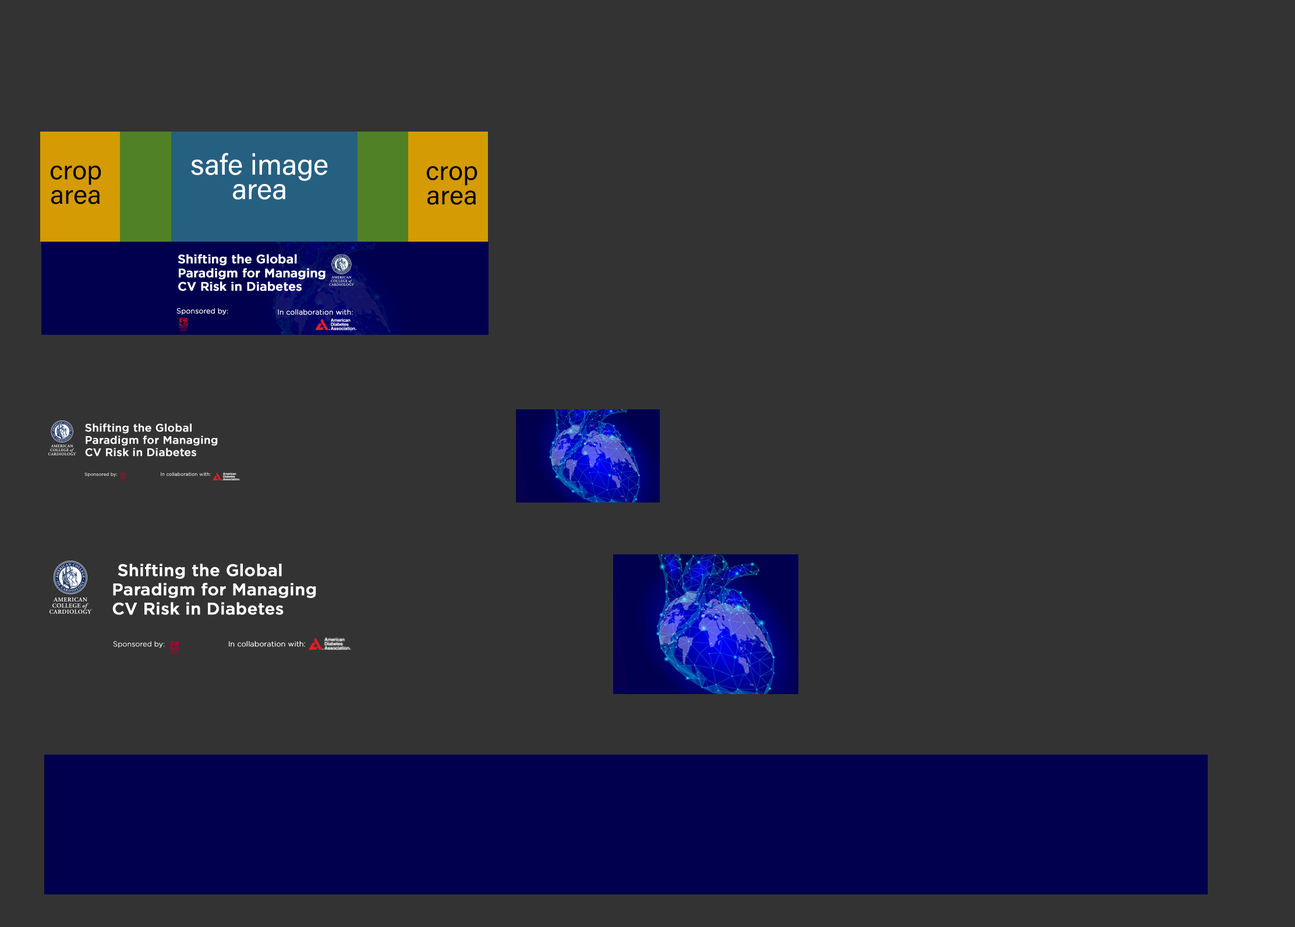
<style>
.page{position:relative;width:1295px;height:927px;background:#333333}
.page>*{position:absolute;margin:0}
.t1{font:29.1px/24.3px "AcuminConcept-Regular";color:#ffffff}
.t2{font:26.7px/24.3px "AcuminConcept-Regular";color:#000000}
.t3{font:12.1px/13.8px "Gotham-Medium";color:#ffffff;font-weight:bold}
.t4{font:7px "Gotham-Light";color:#ffffff;font-weight:bold}
.t5{font:10.9px/12.4px "Gotham-Medium";color:#ffffff;font-weight:bold}
.t6{font:4.4px "Gotham-Light";font-weight:bold}
.t7{font:4.7px "Gotham-Light";color:#ffffff;font-weight:bold}
.t8{font:16.7px/19.1px "Gotham-Medium";color:#ffffff;font-weight:bold}
.t9{font:16.7px/19.1px "Gotham-Light";color:#00aeef;font-weight:bold}
.t10{font:7.1px "Gotham-Light";color:#ffffff;font-weight:bold}
</style>
<div class="page">
<p class="t1" style="left:191px;top:153px;width:137px;height:47px;text-align:center">safe image<br>area</p>
<p class="t2" style="left:50px;top:165px;width:51px;height:39px;text-align:center">crop<br>area</p>
<p class="t2" style="left:426px;top:166px;width:52px;height:39px;text-align:center">crop<br>area</p>
<p class="t3" style="left:178px;top:254px;width:148px;height:37px">Shifting the Global <br>Paradigm for Managing <br>CV Risk in Diabetes</p>
<p class="t4" style="left:176px;top:308px;width:52px;height:7px">Sponsored by:</p>
<p class="t4" style="left:278px;top:309px;width:75px;height:6px">In collaboration with:</p>
<p class="t5" style="left:85px;top:423px;width:133px;height:34px">Shifting the Global <br>Paradigm for Managing <br>CV Risk in Diabetes</p>
<p class="t6" style="left:84px;top:472px;width:33px;height:5px">Sponsored by:</p>
<p class="t7" style="left:161px;top:472px;width:50px;height:4px">In collaboration with:</p>
<p class="t8" style="left:112px;top:564px;width:204px;height:51px"><span class="t9"> </span>Shifting the Global <br>Paradigm for Managing <br>CV Risk in Diabetes</p>
<p class="t4" style="left:113px;top:641px;width:52px;height:7px">Sponsored by:</p>
<p class="t10" style="left:229px;top:641px;width:76px;height:6px">In collaboration with:</p>
</div>
